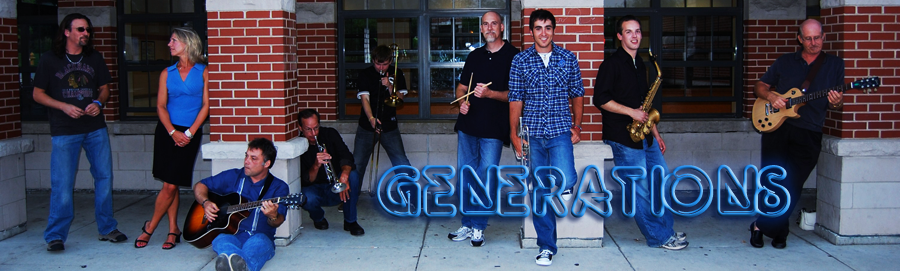
<style>
.page{position:relative;width:900px;height:271px}
.page>*{position:absolute;margin:0}
.t1{font:75px "NeonLights-";letter-spacing:-0.075em}
</style>
<div class="page">
<p class="t1" style="left:376px;top:164px;width:415px;height:54px">Generations</p>
</div>
